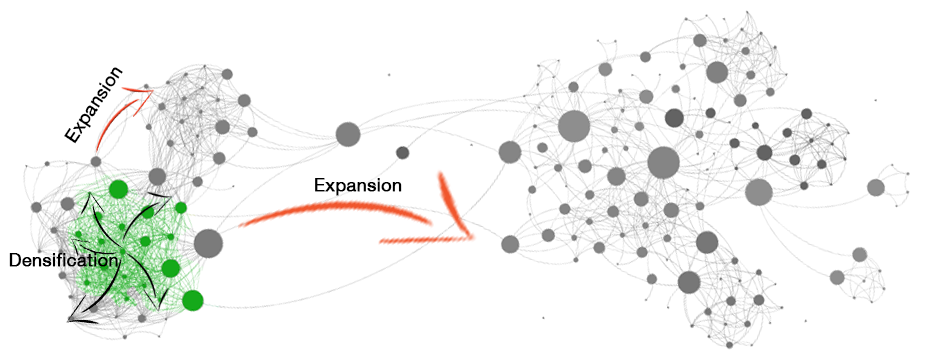
<style>
.page{position:relative;width:927px;height:357px;background:#ffffff}
.page>*{position:absolute;margin:0}
.t1{font:18px "HelveticaNeue";color:#000000;font-weight:bold}
</style>
<div class="page">
<p class="t1" style="left:64px;top:67px;width:59px;height:77px;rotate:-56deg">Expansion</p>
<p class="t1" style="left:315px;top:178px;width:87px;height:18px">Expansion</p>
<p class="t1" style="left:9px;top:253px;width:109px;height:14px">Densification</p>
</div>
